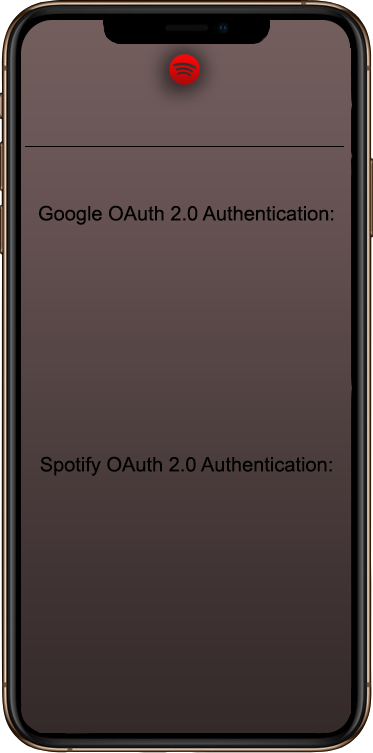
<style>
.page{position:relative;width:373px;height:753px}
.page>*{position:absolute;margin:0}
.t1{font:20px "ArialMT";color:#000000}
</style>
<div class="page">
<p class="t1" style="left:39px;top:205px;width:295px;height:20px">Google OAuth 2.0 Authentication:</p>
<p class="t1" style="left:40px;top:456px;width:292px;height:20px">Spotify OAuth 2.0 Authentication:</p>
</div>
